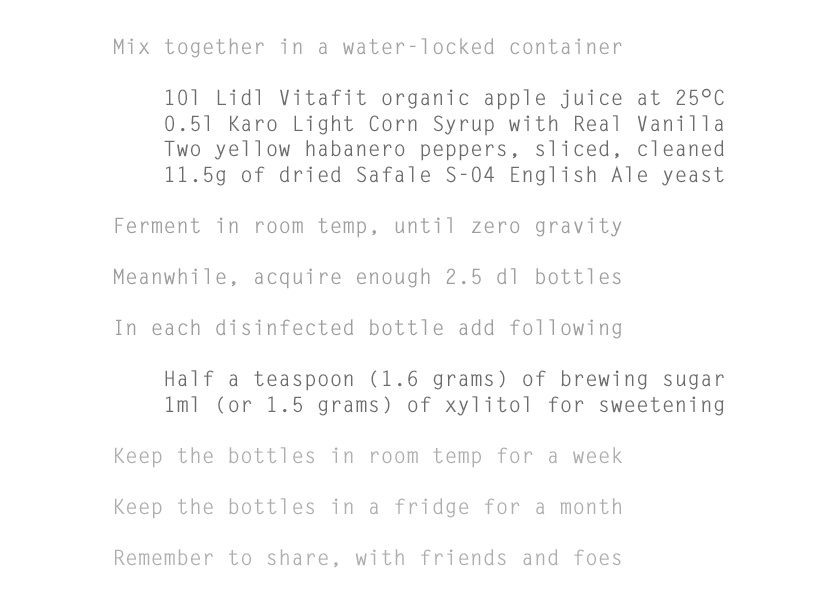
<style>
.page{position:relative;width:837px;height:612px;background:#ffffff}
.page>*{position:absolute;margin:0}
.t1{font:21.3px "LetterGothicStd-Bold";color:#6c6c6c}
.t2{font:21.3px "LetterGothicStd-Bold";color:#a4a4a4}
.t3{font:21.3px "LetterGothicStd-Bold";color:#9e9e9e}
.t4{font:21.3px "LetterGothicStd-Bold";color:#aeaeae}
</style>
<div class="page">
<p class="t1" style="left:114px;top:38px;width:610px;height:530px"><span class="t2">Mix together in a water-locked container<br></span><br>    10l Lidl Vitafit organic apple juice at 25°C<br>    0.5l Karo Light Corn Syrup with Real Vanilla<br>    Two yellow habanero peppers, sliced, cleaned<br>    11.5g of dried Safale S-04 English Ale yeast<br><br><span class="t3">Ferment in room temp, until zero gravity<br><br>Meanwhile, acquire enough 2.5 dl bottles<br><br>In each disinfected bottle add following<br></span><br>    Half a teaspoon (1.6 grams) of brewing sugar<br>    1ml (or 1.5 grams) of xylitol for sweetening<br><br><span class="t4">Keep the bottles in room temp for a week<br><br>Keep the bottles in a fridge for a month<br><br>Remember to share, with friends and foes</span></p>
</div>
